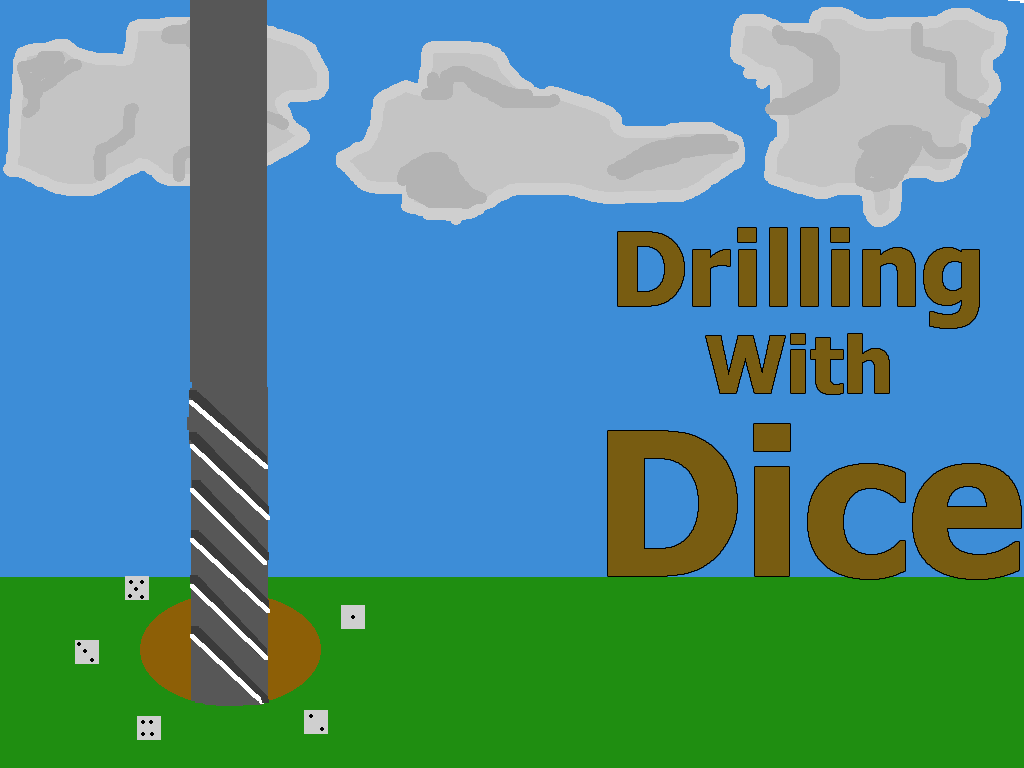
<style>
.page{position:relative;width:1024px;height:768px;background:#3d8dd7}
.page>*{position:absolute;margin:0}
.t1{font:101.9px "Tahoma-Bold";color:#785c11}
.t2{font:77.8px "Tahoma-Bold";color:#785c11}
.t3{font:199.2px "Tahoma-Bold";color:#785c11}
</style>
<div class="page">
<p class="t1" style="left:618px;top:228px;width:361px;height:100px">Drilling</p>
<p class="t2" style="left:706px;top:334px;width:183px;height:60px">With</p>
<p class="t3" style="left:608px;top:424px;width:413px;height:155px">Dice</p>
</div>
